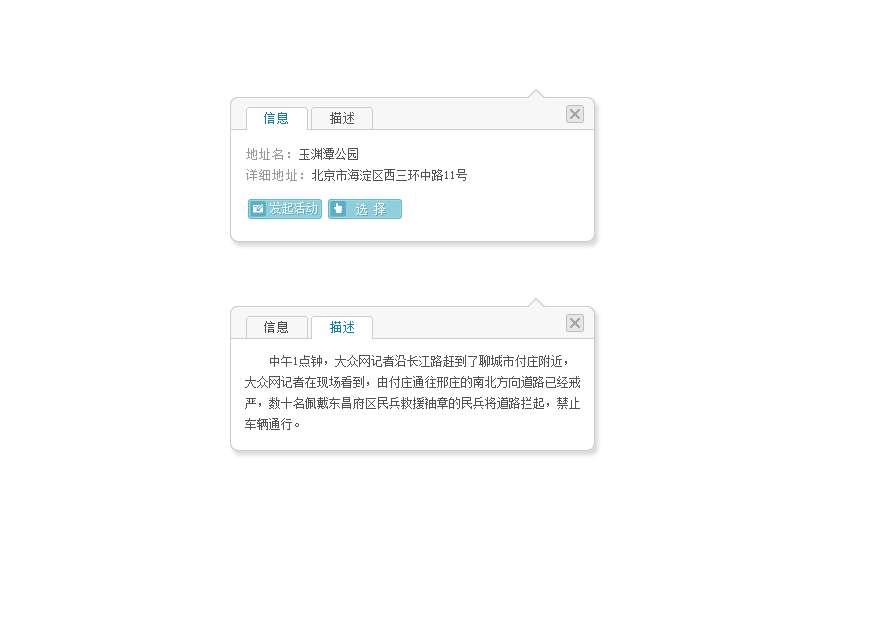
<style>
.page{position:relative;width:885px;height:622px;background:#ffffff}
.page>*{position:absolute;margin:0}
.t1{font:12px "SimSun";letter-spacing:0.1em;color:#137fa5}
.t2{font:12px "SimSun";letter-spacing:0.1em;color:#525252}
.t3{font:12px/21px "SimSun";color:#525252}
.t4{font:12px/21px "SimSun";letter-spacing:0.1em;color:#999999}
.t5{font:12px "SimSun";letter-spacing:0.1em;color:#464646}
</style>
<div class="page">
<p class="t1" style="left:264px;top:112px;width:24px;height:12px">信息</p>
<p class="t2" style="left:330px;top:112px;width:24px;height:12px">描述</p>
<p class="t3" style="left:246px;top:148px;width:221px;height:33px"><span class="t4">地址名：</span>玉渊潭公园<br><span class="t4">详细地址：</span>北京市海淀区西三环中路11号</p>
<p class="t5" style="left:264px;top:321px;width:24px;height:12px">信息</p>
<p class="t1" style="left:330px;top:321px;width:24px;height:12px">描述</p>
<p class="t3" style="left:245px;top:355px;width:335px;height:75px">中午1点钟，大众网记者沿长江路赶到了聊城市付庄附近，大众网记者在现场看到，由付庄通往邢庄的南北方向道路已经戒严，数十名佩戴东昌府区民兵救援袖章的民兵将道路拦起，禁止车辆通行。</p>
</div>
